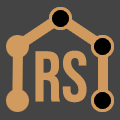
<style>
.page{position:relative;width:120px;height:120px;background:#444444}
.page>*{position:absolute;margin:0}
.t1{font:71.2px "BebasNeue-Regular";color:#cd985e}
</style>
<div class="page">
<p class="t1" style="left:35px;top:50px;width:52px;height:53px">RS</p>
</div>
